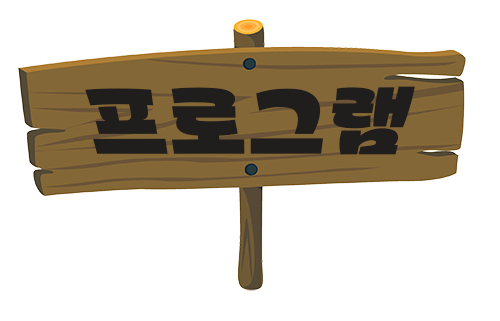
<style>
.page{position:relative;width:500px;height:321px;background:#ffffff}
.page>*{position:absolute;margin:0}
.t1{font:67.1px "Mungyeong-Gamhong-Apple";color:#201d1d}
</style>
<div class="page">
<p class="t1" style="left:85px;top:86px;width:330px;height:69px">프로그램</p>
</div>
